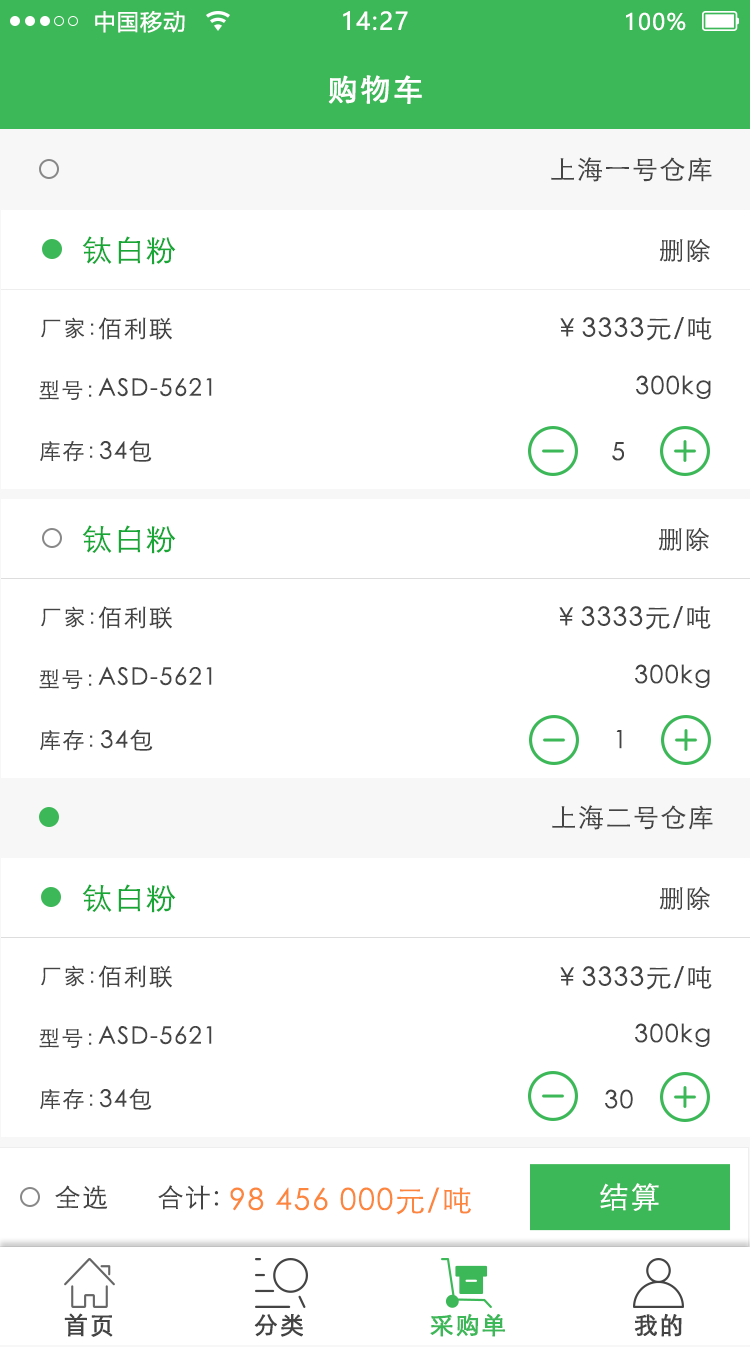
<style>
.page{position:relative;width:750px;height:1347px;background:#ffffff}
.page>*{position:absolute;margin:0}
.t1{font:22px "MicrosoftYaHei";letter-spacing:0.06em;color:#ffffff}
.t2{font:24px "MicrosoftYaHei";letter-spacing:0.06em;color:#ffffff}
.t3{font:30px "STXihei";letter-spacing:0.06em;color:#fefffe;font-weight:bold}
.t4{font:25.9px "STXihei";letter-spacing:0.06em;color:#444444}
.t5{font:30px "STXihei";letter-spacing:0.06em;color:#16a735}
.t6{font:24.9px "STXihei";letter-spacing:0.06em;color:#444444}
.t7{font:21.9px "STXihei";letter-spacing:0.06em;color:#444444}
.t8{font:23.9px "STXihei";letter-spacing:0.06em;color:#444444}
.t9{font:26px "STXihei";letter-spacing:0.06em;color:#444444}
.t10{font:30px "STXihei";letter-spacing:0.06em;color:#fd863e}
.t11{font:29.9px "STXihei";letter-spacing:0.06em;color:#ffffff}
.t12{font:23.9px "STXihei";letter-spacing:0.06em;color:#444444;font-weight:bold}
.t13{font:23.9px "STXihei";letter-spacing:0.06em;color:#3db858;font-weight:bold}
</style>
<div class="page">
<p class="t1" style="left:95px;top:10px;width:90px;height:23px">中国移动</p>
<p class="t2" style="left:343px;top:11px;width:65px;height:20px">14:27</p>
<p class="t1" style="left:626px;top:12px;width:60px;height:19px">100%</p>
<p class="t3" style="left:328px;top:75px;width:94px;height:29px">购物车</p>
<p class="t4" style="left:551px;top:157px;width:161px;height:25px">上海一号仓库</p>
<p class="t5" style="left:82px;top:236px;width:94px;height:29px">钛白粉</p>
<p class="t6" style="left:659px;top:238px;width:51px;height:24px">删除</p>
<p class="t7" style="left:41px;top:317px;width:53px;height:22px">厂家：</p>
<p class="t8" style="left:98px;top:317px;width:74px;height:23px">佰利联</p>
<p class="t9" style="left:560px;top:317px;width:152px;height:24px">￥3333元/吨</p>
<p class="t8" style="left:98px;top:377px;width:114px;height:20px">ASD-5621</p>
<p class="t6" style="left:636px;top:375px;width:75px;height:24px">300kg</p>
<p class="t7" style="left:39px;top:380px;width:53px;height:20px">型号：</p>
<p class="t7" style="left:40px;top:441px;width:53px;height:21px">库存：</p>
<p class="t8" style="left:99px;top:440px;width:53px;height:22px">34包</p>
<p class="t6" style="left:612px;top:442px;width:12px;height:19px">5</p>
<p class="t5" style="left:82px;top:525px;width:94px;height:29px">钛白粉</p>
<p class="t6" style="left:658px;top:527px;width:51px;height:24px">删除</p>
<p class="t7" style="left:41px;top:606px;width:53px;height:22px">厂家：</p>
<p class="t8" style="left:98px;top:606px;width:74px;height:23px">佰利联</p>
<p class="t9" style="left:559px;top:606px;width:152px;height:24px">￥3333元/吨</p>
<p class="t6" style="left:635px;top:664px;width:75px;height:24px">300kg</p>
<p class="t7" style="left:39px;top:669px;width:53px;height:20px">型号：</p>
<p class="t8" style="left:98px;top:666px;width:114px;height:20px">ASD-5621</p>
<p class="t7" style="left:40px;top:730px;width:53px;height:21px">库存：</p>
<p class="t8" style="left:100px;top:729px;width:53px;height:22px">34包</p>
<p class="t6" style="left:616px;top:730px;width:6px;height:19px">1</p>
<p class="t4" style="left:552px;top:805px;width:161px;height:25px">上海二号仓库</p>
<p class="t5" style="left:82px;top:884px;width:94px;height:29px">钛白粉</p>
<p class="t6" style="left:659px;top:886px;width:51px;height:24px">删除</p>
<p class="t7" style="left:41px;top:965px;width:53px;height:22px">厂家：</p>
<p class="t8" style="left:98px;top:965px;width:74px;height:23px">佰利联</p>
<p class="t9" style="left:560px;top:966px;width:152px;height:24px">￥3333元/吨</p>
<p class="t8" style="left:98px;top:1025px;width:114px;height:20px">ASD-5621</p>
<p class="t6" style="left:635px;top:1023px;width:75px;height:24px">300kg</p>
<p class="t7" style="left:39px;top:1028px;width:53px;height:20px">型号：</p>
<p class="t7" style="left:40px;top:1089px;width:53px;height:21px">库存：</p>
<p class="t8" style="left:99px;top:1088px;width:53px;height:22px">34包</p>
<p class="t6" style="left:605px;top:1089px;width:28px;height:20px">30</p>
<p class="t4" style="left:55px;top:1185px;width:53px;height:24px">全选</p>
<p class="t4" style="left:158px;top:1185px;width:61px;height:25px">合计:</p>
<p class="t10" style="left:230px;top:1187px;width:241px;height:28px">98 456 000元/吨</p>
<p class="t11" style="left:600px;top:1183px;width:59px;height:28px">结算</p>
<p class="t12" style="left:64px;top:1313px;width:49px;height:24px">首页</p>
<p class="t13" style="left:430px;top:1313px;width:75px;height:24px">采购单</p>
<p class="t12" style="left:634px;top:1313px;width:48px;height:24px">我的</p>
<p class="t12" style="left:254px;top:1314px;width:49px;height:23px">分类</p>
</div>
